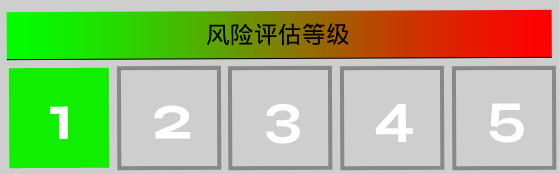
<style>
.page{position:relative;width:559px;height:174px;background:#cecece}
.page>*{position:absolute;margin:0}
.t1{font:24px "DroidSansFallback";color:#000000}
.t2{font:65px "Syne-Bold";color:#ffffff}
.t3{font:59px "Syne-Bold";color:#ffffff}
</style>
<div class="page">
<p class="t1" style="left:206px;top:23px;width:143px;height:23px">风险评估等级</p>
<p class="t2" style="left:50px;top:105px;width:141px;height:34px">1     2</p>
<p class="t3" style="left:266px;top:103px;width:258px;height:41px">3     4     5</p>
</div>
